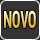
<style>
.page{position:relative;width:40px;height:40px;background:#333333}
.page>*{position:absolute;margin:0}
.t1{font:23.7px "Barlow-Bold";scale:0.56 1}
</style>
<div class="page">
<p class="t1" style="left:4px;top:10px;width:32px;height:18px">NOVO</p>
</div>
